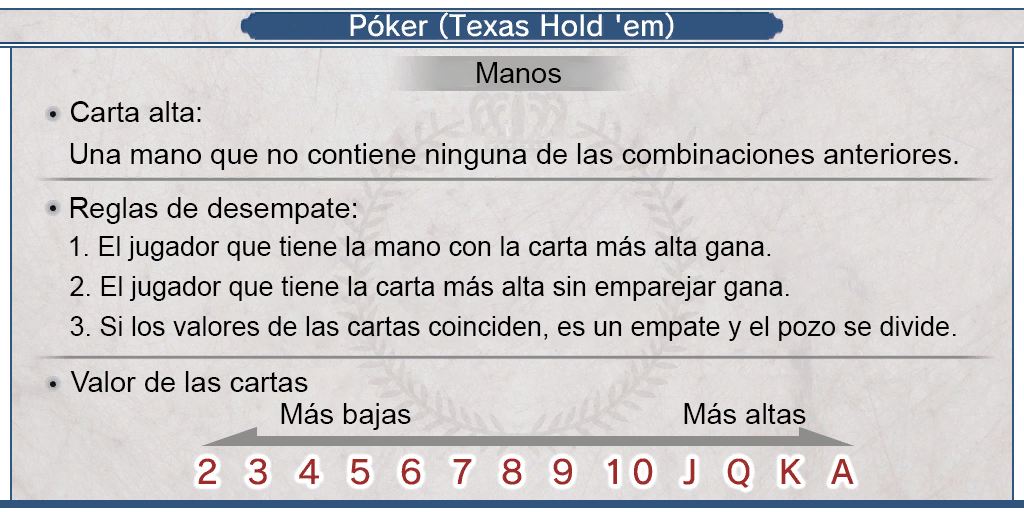
<style>
.page{position:relative;width:1024px;height:512px}
.page>*{position:absolute;margin:0}
.t1{font:29px "ArialMT";color:#000000}
.t2{font:27px "ArialMT";color:#000000}
</style>
<div class="page">
<p class="t1" style="left:477px;top:62px;width:84px;height:21px">Manos</p>
<p class="t1" style="left:70px;top:101px;width:131px;height:21px">Carta alta:</p>
<p class="t1" style="left:70px;top:143px;width:888px;height:27px">Una mano que no contiene ninguna de las combinaciones anteriores.</p>
<p class="t1" style="left:70px;top:197px;width:286px;height:27px">Reglas de desempate:</p>
<p class="t2" style="left:70px;top:236px;width:701px;height:25px">1. El jugador que tiene la mano con la carta más alta gana.</p>
<p class="t2" style="left:70px;top:276px;width:719px;height:25px">2. El jugador que tiene la carta más alta sin emparejar gana.</p>
<p class="t2" style="left:70px;top:316px;width:886px;height:25px">3. Si los valores de las cartas coinciden, es un empate y el pozo se divide.</p>
<p class="t1" style="left:70px;top:371px;width:238px;height:21px">Valor de las cartas</p>
<p class="t1" style="left:281px;top:403px;width:130px;height:27px">Más bajas</p>
<p class="t1" style="left:684px;top:403px;width:122px;height:21px">Más altas</p>
</div>
